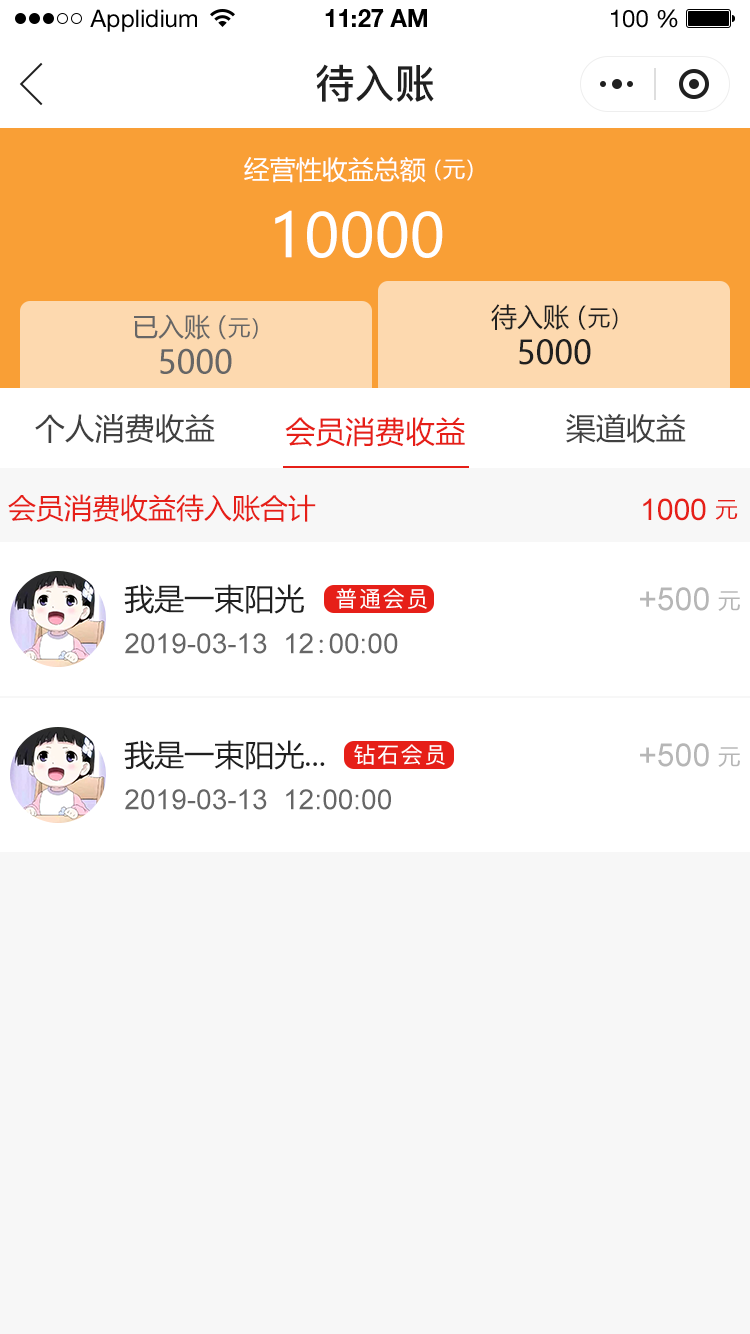
<style>
.page{position:relative;width:750px;height:1334px;background:#f7f7f7}
.page>*{position:absolute;margin:0}
.t1{font:24px "HelveticaNeueLTStd-Roman";color:#000000}
.t2{font:24px "HelveticaNeueLTStd-Bd";color:#000000}
.t3{font:40px "PingFang-SC-Bold";color:#202020;text-transform:uppercase}
.t4{font:26px "MicrosoftYaHei";color:#ffffff;text-transform:uppercase}
.t5{font:22px "MicrosoftYaHei";color:#ffffff;text-transform:uppercase}
.t6{font:60px "MicrosoftYaHei";color:#ffffff;text-transform:uppercase}
.t7{font:26.2px "MicrosoftYaHei";color:#202020;text-transform:uppercase}
.t8{font:22.2px "MicrosoftYaHei";color:#202020;text-transform:uppercase}
.t9{font:26px "MicrosoftYaHei";color:#666666;text-transform:uppercase}
.t10{font:22px "MicrosoftYaHei";color:#666666;text-transform:uppercase}
.t11{font:32.2px "MicrosoftYaHei";color:#202020;text-transform:uppercase}
.t12{font:32px "MicrosoftYaHei";color:#666666;text-transform:uppercase}
.t13{font:30px "MicrosoftYaHei";color:#404040;text-transform:uppercase}
.t14{font:30px "MicrosoftYaHei";color:#e61f18;text-transform:uppercase}
.t15{font:28px "MicrosoftYaHei";color:#e61f18;text-transform:uppercase}
.t16{font:30px "ArialMT";color:#e61f18;text-transform:uppercase}
.t17{font:22px "MicrosoftYaHei";color:#e61f18;text-transform:uppercase}
.t18{font:30px "MicrosoftYaHei";color:#202020;text-transform:uppercase}
.t19{font:22px "PingFang-SC-Medium";letter-spacing:0.08em;color:#ffffff}
.t20{font:32px "ArialMT";color:#b6b6b6;text-transform:uppercase}
.t21{font:22px "MicrosoftYaHei";color:#b6b6b6;text-transform:uppercase}
.t22{font:28px "ArialMT";color:#666666;text-transform:uppercase}
.t23{font:28px "SimSun";color:#666666;text-transform:uppercase}
</style>
<div class="page">
<p class="t1" style="left:90px;top:9px;width:107px;height:23px">Applidium</p>
<p class="t2" style="left:325px;top:9px;width:102px;height:18px">11:27 AM</p>
<p class="t1" style="left:611px;top:9px;width:67px;height:19px">100 %</p>
<p class="t3" style="left:316px;top:64px;width:118px;height:38px">待入账</p>
<p class="t4" style="left:244px;top:157px;width:182px;height:26px">经营性收益总额</p>
<p class="t5" style="left:435px;top:159px;width:38px;height:22px">（元）</p>
<p class="t6" style="left:275px;top:210px;width:168px;height:48px">10000</p>
<p class="t7" style="left:491px;top:304px;width:78px;height:26px">待入账</p>
<p class="t8" style="left:579px;top:305px;width:39px;height:25px"><span class="t7">（</span>元）</p>
<p class="t9" style="left:134px;top:314px;width:76px;height:26px">已入账</p>
<p class="t10" style="left:219px;top:315px;width:39px;height:25px"><span class="t9">（</span>元）</p>
<p class="t11" style="left:519px;top:339px;width:72px;height:26px">5000</p>
<p class="t12" style="left:160px;top:348px;width:72px;height:26px">5000</p>
<p class="t13" style="left:35px;top:414px;width:180px;height:29px">个人消费收益</p>
<p class="t13" style="left:566px;top:413px;width:120px;height:30px">渠道收益</p>
<p class="t14" style="left:285px;top:417px;width:180px;height:30px">会员消费收益</p>
<p class="t15" style="left:8px;top:494px;width:308px;height:28px">会员消费收益待入账合计</p>
<p class="t16" style="left:643px;top:498px;width:63px;height:23px">1000</p>
<p class="t17" style="left:715px;top:500px;width:23px;height:20px">元</p>
<p class="t18" style="left:124px;top:584px;width:180px;height:30px">我是一束阳光</p>
<p class="t19" style="left:336px;top:588px;width:91px;height:21px">普通会员</p>
<p class="t20" style="left:640px;top:587px;width:69px;height:24px">+500</p>
<p class="t21" style="left:718px;top:591px;width:22px;height:20px">元</p>
<p class="t22" style="left:125px;top:633px;width:273px;height:21px">2019-03-13  12<span class="t23">:</span>00:00</p>
<p class="t18" style="left:124px;top:740px;width:201px;height:30px">我是一束阳光...</p>
<p class="t19" style="left:354px;top:744px;width:91px;height:21px">钻石会员</p>
<p class="t20" style="left:640px;top:743px;width:69px;height:24px">+500</p>
<p class="t21" style="left:718px;top:747px;width:22px;height:20px">元</p>
<p class="t22" style="left:125px;top:789px;width:266px;height:21px">2019-03-13  12:00:00</p>
</div>
